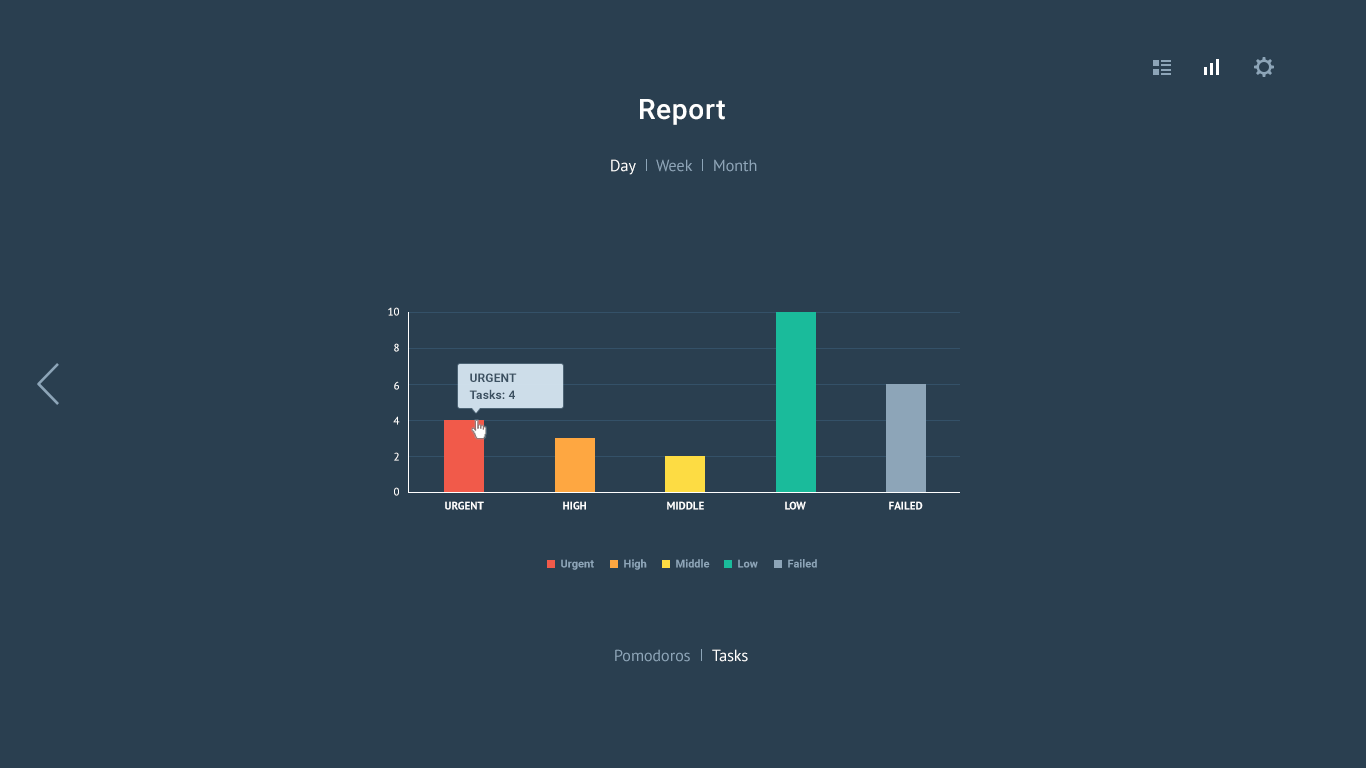
<style>
.page{position:relative;width:1366px;height:768px;background:#2a3f50}
.page>*{position:absolute;margin:0}
.t1{font:28px "Roboto-Medium";letter-spacing:0.025em;color:#ffffff}
.t2{font:16px "PTSans-Regular";color:#ffffff}
.t3{font:16px "PTSans-Regular";color:#8ea5b8}
.t4{font:11px "PTSans-Regular";color:#ffffff}
.t5{font:12px "Roboto-Bold";letter-spacing:0.01em;color:#3c5162}
.t6{font:11px "PTSans-Bold";color:#ffffff;text-transform:uppercase}
.t7{font:11px "Roboto-Bold";color:#8da5b8}
.t8{font:16px "PTSans-Regular";color:#8da5b8}
</style>
<div class="page">
<p class="t1" style="left:640px;top:99px;width:85px;height:26px">Report</p>
<p class="t2" style="left:611px;top:159px;width:25px;height:16px">Day</p>
<p class="t3" style="left:656px;top:159px;width:37px;height:13px">Week</p>
<p class="t3" style="left:714px;top:159px;width:43px;height:13px">Month</p>
<p class="t4" style="left:388px;top:307px;width:11px;height:9px">10</p>
<p class="t4" style="left:394px;top:343px;width:5px;height:9px">8</p>
<p class="t5" style="left:470px;top:373px;width:47px;height:9px">URGENT</p>
<p class="t4" style="left:394px;top:381px;width:5px;height:9px">6</p>
<p class="t5" style="left:469px;top:389px;width:46px;height:10px">Tasks: 4</p>
<p class="t4" style="left:393px;top:416px;width:7px;height:9px">4</p>
<p class="t4" style="left:394px;top:452px;width:5px;height:9px">2</p>
<p class="t4" style="left:394px;top:487px;width:5px;height:9px">0</p>
<p class="t6" style="left:445px;top:501px;width:39px;height:9px">Urgent</p>
<p class="t6" style="left:563px;top:501px;width:23px;height:9px">High</p>
<p class="t6" style="left:667px;top:501px;width:37px;height:9px">Middle</p>
<p class="t6" style="left:785px;top:501px;width:21px;height:9px">Low</p>
<p class="t6" style="left:889px;top:501px;width:34px;height:9px">Failed</p>
<p class="t7" style="left:561px;top:559px;width:33px;height:11px">Urgent</p>
<p class="t7" style="left:624px;top:559px;width:23px;height:11px">High</p>
<p class="t7" style="left:676px;top:559px;width:34px;height:9px">Middle</p>
<p class="t7" style="left:738px;top:559px;width:20px;height:9px">Low</p>
<p class="t7" style="left:788px;top:559px;width:29px;height:9px">Failed</p>
<p class="t8" style="left:615px;top:649px;width:75px;height:13px">Pomodoros</p>
<p class="t2" style="left:712px;top:649px;width:36px;height:13px">Tasks</p>
</div>
